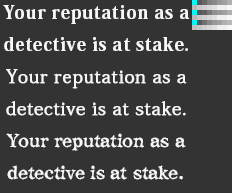
<style>
.page{position:relative;width:232px;height:193px;background:#333333}
.page>*{position:absolute;margin:0}
.t1{font:18px/32px "KozMinPro-Heavy";letter-spacing:0.03em;color:#f8f8f8}
.t2{font:18px/32px "AdobeFangsongStd-Regular";letter-spacing:0.025em;color:#f8f8f8;font-weight:bold}
.t3{font:18px/32px "ComicMysteryStd-DB";letter-spacing:-0.02em;color:#f8f8f8}
</style>
<div class="page">
<p class="t1" style="left:3px;top:5px;width:187px;height:175px;text-align:center">Your reputation as a<br>detective is at stake.<br><span class="t2">Your reputation as a<br>detective is at stake.<br></span><span class="t3">Your reputation as a<br>detective is at stake.</span></p>
</div>
